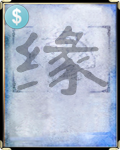
<style>
.page{position:relative;width:120px;height:150px}
.page>*{position:absolute;margin:0}
.t1{font:100px "FZGLJW--GB1-0";color:#868b9a}
</style>
<div class="page">
<p class="t1" style="left:15px;top:25px;width:92px;height:71px">缘</p>
</div>
